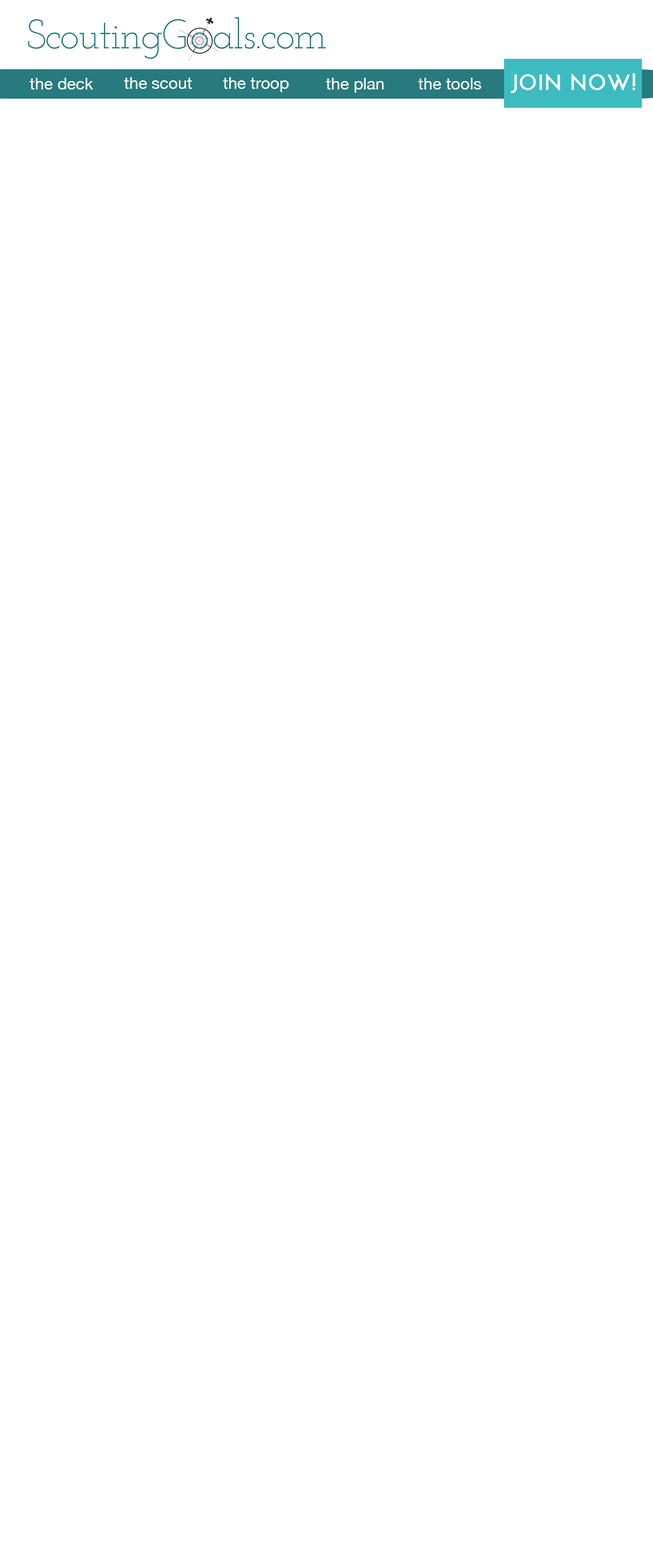
<style>
.page{position:relative;width:653px;height:1568px;background:#ffffff}
.page>*{position:absolute;margin:0}
.t1{font:16.3px "HelveticaNeue";color:#ffffff}
.t2{font:21.8px "JosefinSans-Bold";color:#ffffff;font-weight:bold}
</style>
<div class="page">
<p class="t1" style="left:29px;top:78px;width:64px;height:12px">the deck</p>
<p class="t1" style="left:124px;top:77px;width:68px;height:12px">the scout</p>
<p class="t1" style="left:223px;top:77px;width:66px;height:15px">the troop</p>
<p class="t1" style="left:326px;top:78px;width:58px;height:15px">the plan</p>
<p class="t1" style="left:418px;top:78px;width:64px;height:12px">the tools</p>
<p class="t2" style="left:511px;top:73px;width:125px;height:20px">JOIN NOW!</p>
</div>
